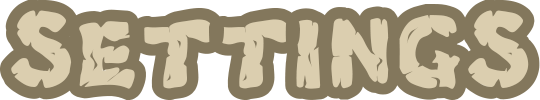
<style>
.page{position:relative;width:540px;height:100px;background:#83775c}
.page>*{position:absolute;margin:0}
.t1{font:144px "Chlorinar-Regular";color:#83775c}
</style>
<div class="page">
<p class="t1" style="left:0px;top:0px;width:540px;height:100px">settings</p>
</div>
